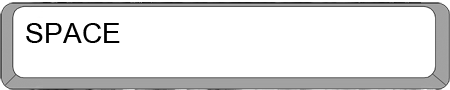
<style>
.page{position:relative;width:450px;height:90px;background:#ffffff}
.page>*{position:absolute;margin:0}
.t1{font:43.3px "BrowalliaUPC";color:#000000}
</style>
<div class="page">
<p class="t1" style="left:26px;top:23px;width:94px;height:20px">SPACE</p>
</div>
